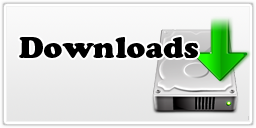
<style>
.page{position:relative;width:256px;height:128px}
.page>*{position:absolute;margin:0}
.t1{font:30px "CooperBlackStd";color:#000000}
</style>
<div class="page">
<p class="t1" style="left:19px;top:37px;width:179px;height:22px">Downloads</p>
</div>
